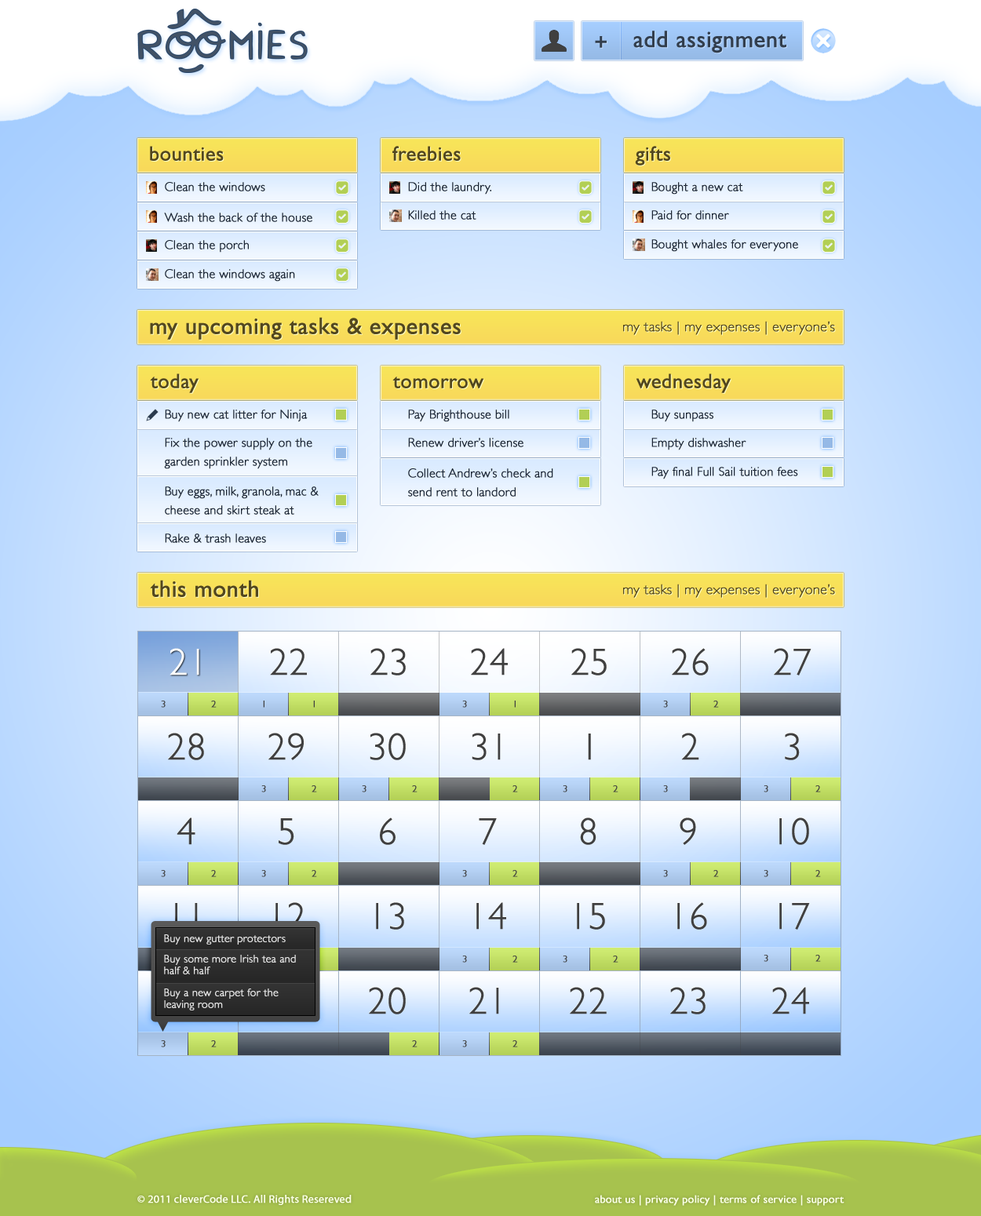
<style>
.page{position:relative;width:981px;height:1216px}
.page>*{position:absolute;margin:0}
.t1{font:23.5px "GillSans";color:#323e4d;font-weight:bold}
.t2{font:20.4px "GillSans";color:#52471e;font-weight:bold}
.t3{font:12.6px "GillSans-Light";color:#1c2633;font-weight:bold}
.t4{font:23.5px "GillSans";color:#52471e;font-weight:bold}
.t5{font:14.1px "GillSans-Light";color:#52471e;font-weight:bold}
.t6{font:12.6px/18.8px "GillSans-Light";color:#1c2633;font-weight:bold}
.t7{font:37.7px "GillSans-Light";color:#ffffff;font-weight:bold}
.t8{font:37.7px "GillSans-Light";color:#404040;font-weight:bold}
.t9{font:9.4px "GillSans-Light";color:#404040;font-weight:bold}
.t10{font:11px "GillSans-Light";color:#e6e6e6;font-weight:bold}
.t11{font:11px/11.8px "GillSans-Light";color:#e6e6e6;font-weight:bold}
.t12{font:9.4px "GillSans-Light";font-weight:bold}
.t13{font:11px "MyriadPro-Regular";color:#f9ffe5;font-weight:bold}
.t14{font:11px "GillSans";color:#f9ffe5;font-weight:bold}
</style>
<div class="page">
<p class="t1" style="left:595px;top:31px;width:191px;height:22px">+    add assignment</p>
<p class="t2" style="left:150px;top:146px;width:74px;height:15px">bounties</p>
<p class="t2" style="left:392px;top:146px;width:69px;height:15px">freebies</p>
<p class="t2" style="left:635px;top:146px;width:35px;height:20px">gifts</p>
<p class="t3" style="left:165px;top:182px;width:100px;height:9px">Clean the windows</p>
<p class="t3" style="left:408px;top:182px;width:83px;height:13px">Did the laundry.</p>
<p class="t3" style="left:651px;top:182px;width:92px;height:13px">Bought a new cat</p>
<p class="t3" style="left:164px;top:213px;width:148px;height:9px">Wash the back of the house</p>
<p class="t3" style="left:408px;top:210px;width:68px;height:10px">Killed the cat</p>
<p class="t3" style="left:651px;top:210px;width:78px;height:10px">Paid for dinner</p>
<p class="t3" style="left:165px;top:240px;width:84px;height:13px">Clean the porch</p>
<p class="t3" style="left:651px;top:239px;width:147px;height:13px">Bought whales for everyone</p>
<p class="t3" style="left:165px;top:269px;width:130px;height:13px">Clean the windows again</p>
<p class="t4" style="left:150px;top:317px;width:311px;height:23px">my upcoming tasks &amp; expenses</p>
<p class="t5" style="left:623px;top:321px;width:212px;height:14px">my tasks | my expenses | everyone’s</p>
<p class="t2" style="left:150px;top:373px;width:48px;height:20px">today</p>
<p class="t2" style="left:392px;top:377px;width:91px;height:11px">tomorrow</p>
<p class="t2" style="left:635px;top:373px;width:95px;height:20px">wednesday</p>
<p class="t3" style="left:165px;top:410px;width:143px;height:12px">Buy new cat litter for Ninja</p>
<p class="t3" style="left:408px;top:410px;width:101px;height:12px">Pay Brighthouse bill</p>
<p class="t3" style="left:651px;top:410px;width:62px;height:12px">Buy sunpass</p>
<p class="t6" style="left:164px;top:438px;width:148px;height:31px">Fix the power supply on the garden sprinkler system</p>
<p class="t3" style="left:408px;top:438px;width:115px;height:9px">Renew driver’s license</p>
<p class="t3" style="left:651px;top:438px;width:95px;height:12px">Empty dishwasher</p>
<p class="t6" style="left:408px;top:468px;width:145px;height:29px">Collect Andrew’s check and send rent to landord</p>
<p class="t3" style="left:651px;top:467px;width:147px;height:12px">Pay final Full Sail tuition fees</p>
<p class="t6" style="left:165px;top:486px;width:154px;height:29px">Buy eggs, milk, granola, mac &amp; cheese and skirt steak at Publix</p>
<p class="t3" style="left:165px;top:533px;width:101px;height:10px">Rake &amp; trash leaves</p>
<p class="t4" style="left:150px;top:580px;width:108px;height:17px">this month</p>
<p class="t5" style="left:623px;top:584px;width:212px;height:14px">my tasks | my expenses | everyone’s</p>
<p class="t7" style="left:169px;top:648px;width:30px;height:27px">21</p>
<p class="t8" style="left:270px;top:648px;width:37px;height:27px">22</p>
<p class="t8" style="left:370px;top:648px;width:36px;height:27px">23</p>
<p class="t8" style="left:471px;top:648px;width:37px;height:27px">24</p>
<p class="t8" style="left:571px;top:648px;width:35px;height:27px">25</p>
<p class="t8" style="left:672px;top:648px;width:36px;height:27px">26</p>
<p class="t8" style="left:774px;top:648px;width:37px;height:27px">27</p>
<p class="t9" style="left:161px;top:701px;width:5px;height:7px">3</p>
<p class="t9" style="left:211px;top:701px;width:6px;height:7px">2</p>
<p class="t9" style="left:263px;top:701px;width:1px;height:7px">1</p>
<p class="t9" style="left:313px;top:701px;width:2px;height:7px">1</p>
<p class="t9" style="left:462px;top:701px;width:5px;height:7px">3</p>
<p class="t9" style="left:514px;top:701px;width:1px;height:7px">1</p>
<p class="t9" style="left:663px;top:701px;width:5px;height:7px">3</p>
<p class="t9" style="left:713px;top:701px;width:6px;height:7px">2</p>
<p class="t8" style="left:168px;top:733px;width:36px;height:27px">28</p>
<p class="t8" style="left:268px;top:733px;width:36px;height:27px">29</p>
<p class="t8" style="left:370px;top:733px;width:36px;height:27px">30</p>
<p class="t8" style="left:471px;top:733px;width:30px;height:27px">31</p>
<p class="t8" style="left:588px;top:734px;width:3px;height:26px">1</p>
<p class="t8" style="left:681px;top:733px;width:18px;height:27px">2</p>
<p class="t8" style="left:785px;top:733px;width:14px;height:27px">3</p>
<p class="t9" style="left:261px;top:785px;width:5px;height:7px">3</p>
<p class="t9" style="left:311px;top:785px;width:6px;height:7px">2</p>
<p class="t9" style="left:362px;top:785px;width:4px;height:7px">3</p>
<p class="t9" style="left:412px;top:785px;width:5px;height:7px">2</p>
<p class="t9" style="left:512px;top:785px;width:6px;height:7px">2</p>
<p class="t9" style="left:562px;top:785px;width:5px;height:7px">3</p>
<p class="t9" style="left:613px;top:785px;width:5px;height:7px">2</p>
<p class="t9" style="left:663px;top:785px;width:5px;height:7px">3</p>
<p class="t9" style="left:763px;top:785px;width:5px;height:7px">3</p>
<p class="t9" style="left:815px;top:785px;width:6px;height:7px">2</p>
<p class="t8" style="left:177px;top:817px;width:18px;height:28px">4</p>
<p class="t8" style="left:278px;top:818px;width:16px;height:27px">5</p>
<p class="t8" style="left:380px;top:817px;width:15px;height:28px">6</p>
<p class="t8" style="left:479px;top:818px;width:18px;height:27px">7</p>
<p class="t8" style="left:580px;top:817px;width:16px;height:28px">8</p>
<p class="t8" style="left:679px;top:817px;width:17px;height:28px">9</p>
<p class="t8" style="left:779px;top:817px;width:30px;height:28px">10</p>
<p class="t9" style="left:161px;top:870px;width:5px;height:7px">3</p>
<p class="t9" style="left:211px;top:870px;width:6px;height:7px">2</p>
<p class="t9" style="left:261px;top:870px;width:5px;height:7px">3</p>
<p class="t9" style="left:311px;top:870px;width:6px;height:7px">2</p>
<p class="t9" style="left:462px;top:870px;width:5px;height:7px">3</p>
<p class="t9" style="left:512px;top:870px;width:6px;height:7px">2</p>
<p class="t9" style="left:663px;top:870px;width:5px;height:7px">3</p>
<p class="t9" style="left:713px;top:870px;width:6px;height:7px">2</p>
<p class="t9" style="left:763px;top:870px;width:5px;height:7px">3</p>
<p class="t9" style="left:815px;top:870px;width:6px;height:7px">2</p>
<p class="t8" style="left:175px;top:903px;width:23px;height:27px">11</p>
<p class="t8" style="left:275px;top:902px;width:30px;height:28px">12</p>
<p class="t8" style="left:376px;top:902px;width:28px;height:28px">13</p>
<p class="t8" style="left:476px;top:902px;width:30px;height:28px">14</p>
<p class="t8" style="left:577px;top:903px;width:28px;height:27px">15</p>
<p class="t8" style="left:677px;top:902px;width:30px;height:28px">16</p>
<p class="t8" style="left:779px;top:903px;width:31px;height:27px">17</p>
<p class="t10" style="left:164px;top:934px;width:122px;height:11px">Buy new gutter protectors</p>
<p class="t11" style="left:164px;top:955px;width:132px;height:19px">Buy some more Irish tea and<br>half &amp; half</p>
<p class="t12" style="left:311px;top:956px;width:6px;height:7px">2</p>
<p class="t9" style="left:462px;top:956px;width:5px;height:7px">3</p>
<p class="t9" style="left:512px;top:956px;width:6px;height:7px">2</p>
<p class="t9" style="left:562px;top:956px;width:5px;height:7px">3</p>
<p class="t9" style="left:613px;top:956px;width:5px;height:7px">2</p>
<p class="t9" style="left:763px;top:955px;width:5px;height:7px">3</p>
<p class="t9" style="left:815px;top:955px;width:6px;height:7px">2</p>
<p class="t11" style="left:164px;top:988px;width:114px;height:22px">Buy a new carpet for the <br>leaving room</p>
<p class="t8" style="left:369px;top:987px;width:37px;height:27px">20</p>
<p class="t8" style="left:469px;top:987px;width:30px;height:27px">21</p>
<p class="t8" style="left:570px;top:987px;width:36px;height:27px">22</p>
<p class="t8" style="left:670px;top:987px;width:35px;height:27px">23</p>
<p class="t8" style="left:772px;top:987px;width:37px;height:27px">24</p>
<p class="t9" style="left:161px;top:1040px;width:5px;height:7px">3</p>
<p class="t9" style="left:211px;top:1040px;width:6px;height:7px">2</p>
<p class="t9" style="left:412px;top:1040px;width:5px;height:7px">2</p>
<p class="t9" style="left:462px;top:1040px;width:5px;height:7px">3</p>
<p class="t9" style="left:512px;top:1040px;width:6px;height:7px">2</p>
<p class="t13" style="left:137px;top:1195px;width:214px;height:10px">© 2011 cleverCode LLC. All Rights Resereved</p>
<p class="t14" style="left:595px;top:1195px;width:249px;height:11px">about us | privacy policy | terms of service | support</p>
</div>
